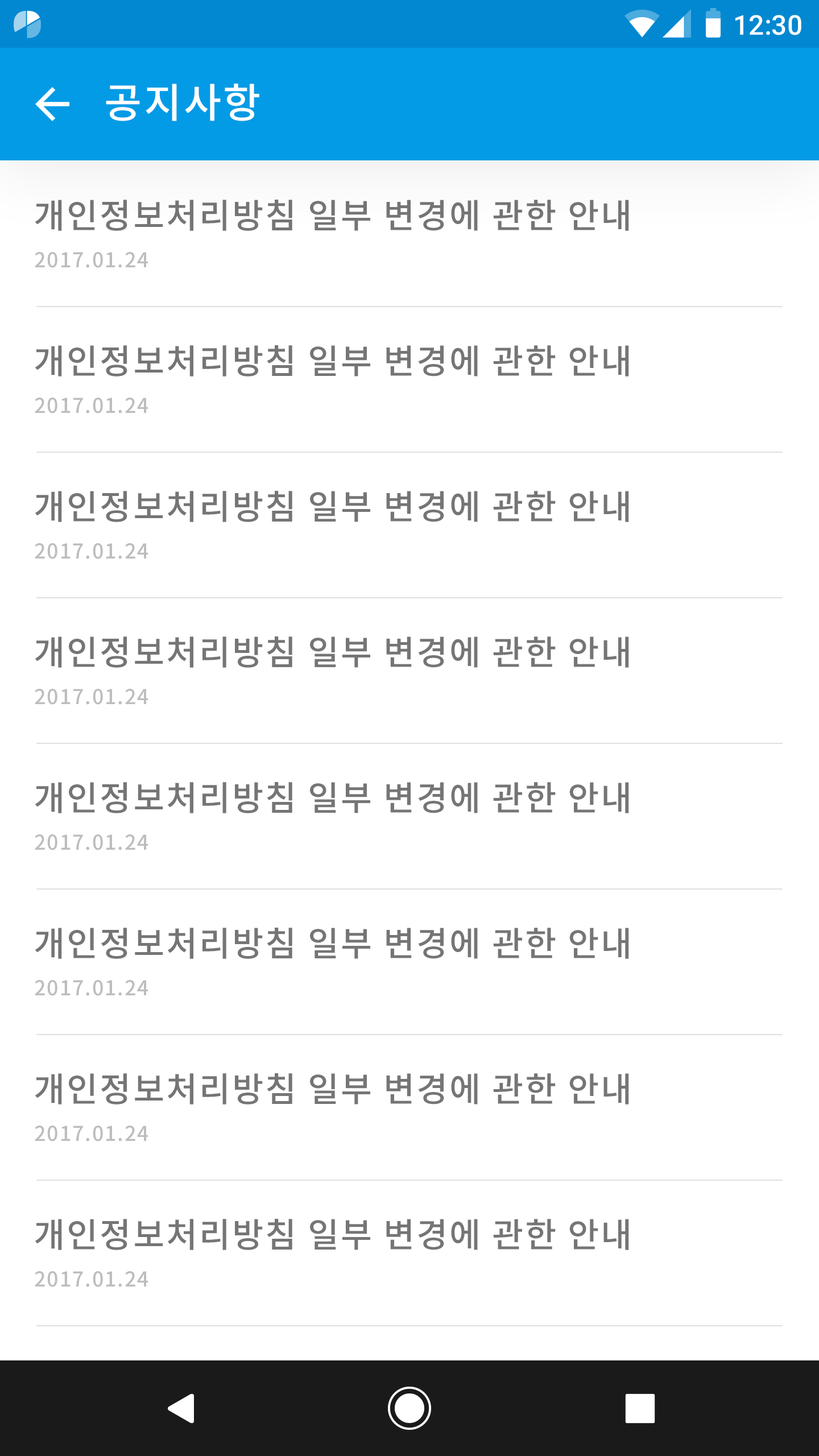
<style>
.page{position:relative;width:819px;height:1456px;background:#ffffff}
.page>*{position:absolute;margin:0}
.t1{font:27.3px "Roboto-Medium";color:#ffffff}
.t2{font:40.9px "NotoSansCJKkr-Medium";letter-spacing:0.05em;color:#ffffff}
.t3{font:34.1px "NotoSansCJKkr-Medium";letter-spacing:0.05em;color:#757575}
.t4{font:20.5px "NotoSansCJKkr-Medium";letter-spacing:0.05em;color:#bdbdbd}
</style>
<div class="page">
<p class="t1" style="left:735px;top:15px;width:66px;height:20px">12:30</p>
<p class="t2" style="left:106px;top:84px;width:153px;height:37px">공지사항</p>
<p class="t3" style="left:35px;top:200px;width:594px;height:31px">개인정보처리방침 일부 변경에 관한 안내</p>
<p class="t4" style="left:35px;top:252px;width:113px;height:16px">2017.01.24</p>
<p class="t3" style="left:35px;top:345px;width:594px;height:32px">개인정보처리방침 일부 변경에 관한 안내</p>
<p class="t4" style="left:35px;top:398px;width:113px;height:15px">2017.01.24</p>
<p class="t3" style="left:35px;top:491px;width:594px;height:31px">개인정보처리방침 일부 변경에 관한 안내</p>
<p class="t4" style="left:35px;top:543px;width:113px;height:16px">2017.01.24</p>
<p class="t3" style="left:35px;top:636px;width:594px;height:32px">개인정보처리방침 일부 변경에 관한 안내</p>
<p class="t4" style="left:35px;top:689px;width:113px;height:16px">2017.01.24</p>
<p class="t3" style="left:35px;top:782px;width:594px;height:31px">개인정보처리방침 일부 변경에 관한 안내</p>
<p class="t4" style="left:35px;top:834px;width:113px;height:16px">2017.01.24</p>
<p class="t3" style="left:35px;top:928px;width:594px;height:31px">개인정보처리방침 일부 변경에 관한 안내</p>
<p class="t4" style="left:35px;top:980px;width:113px;height:16px">2017.01.24</p>
<p class="t3" style="left:35px;top:1073px;width:594px;height:31px">개인정보처리방침 일부 변경에 관한 안내</p>
<p class="t4" style="left:35px;top:1126px;width:113px;height:15px">2017.01.24</p>
<p class="t3" style="left:35px;top:1219px;width:594px;height:31px">개인정보처리방침 일부 변경에 관한 안내</p>
<p class="t4" style="left:35px;top:1271px;width:113px;height:16px">2017.01.24</p>
</div>
